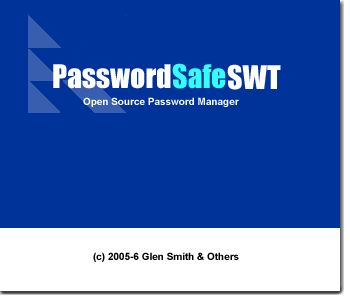
<style>
.page{position:relative;width:350px;height:300px;background:#003399}
.page>*{position:absolute;margin:0}
.t1{font:29.9px "Impact";color:#ffffff}
.t2{font:29.9px "Impact";color:#33ffff}
.t3{font:10px "Arial-BoldMT";color:#ffffff}
.t4{font:10px "Arial-BoldMT";color:#000000}
</style>
<div class="page">
<p class="t1" style="left:53px;top:64px;width:118px;height:25px">Password</p>
<p class="t2" style="left:172px;top:63px;width:54px;height:26px">Safe</p>
<p class="t1" style="left:227px;top:64px;width:54px;height:26px">SWT</p>
<p class="t3" style="left:83px;top:97px;width:156px;height:10px">Open Source Password Manager</p>
<p class="t4" style="left:93px;top:252px;width:146px;height:10px">(c) 2005-6 Glen Smith &amp; Others</p>
</div>
